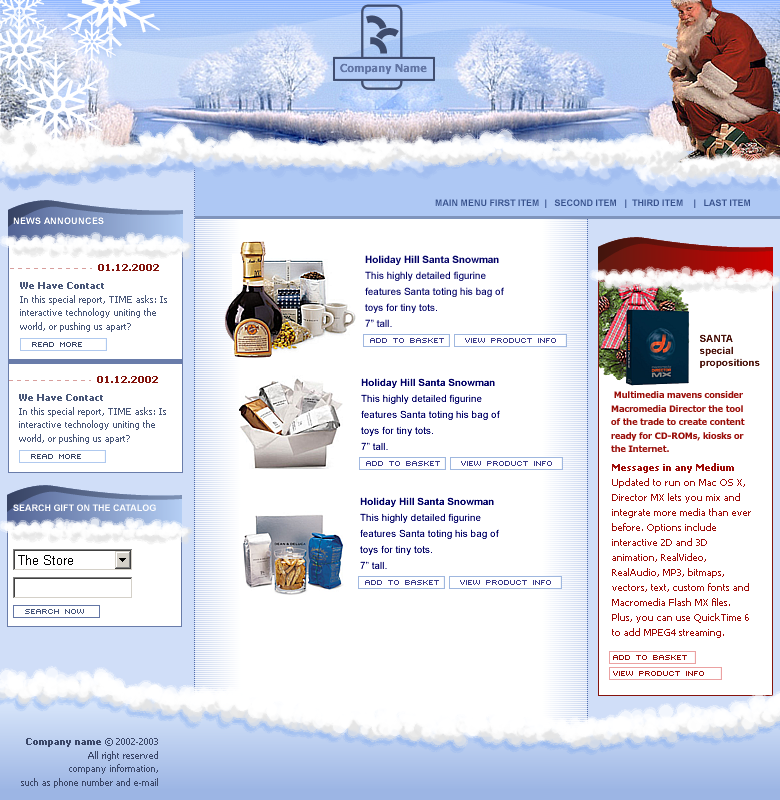
<style>
.page{position:relative;width:780px;height:800px;background:#ffffff}
.page>*{position:absolute;margin:0}
.t1{font:9px "Arial-BoldMT";color:#38528d}
.t2{font:9px "Arial-BoldMT";color:#ffffff}
.t3{font:10px/16px "ArialMT";color:#000066}
.t4{font:10px/16px "Arial-BoldMT";color:#000066}
.t5{font:9px "Tahoma-Bold";color:#83130c}
.t6{font:9px/13.5px "Tahoma";color:#495779}
.t7{font:9px/13.5px "Tahoma-Bold";color:#495779}
.t8{font:8px "Sevenet 7 Cyr";letter-spacing:0.14em;color:#3b4869}
.t9{font:8px "Sevenet 7 Cyr";letter-spacing:0.14em;color:#3d3d8b}
.t10{font:10px/12px "Arial-BoldMT";color:#4b140c}
.t11{font:9px/13.5px "Tahoma-Bold";color:#9a0d08}
.t12{font:10px/15px "Tahoma";color:#9e0c08}
.t13{font:10px/15px "Tahoma-Bold";color:#9e0c08}
.t14{font:8px "Sevenet 7 Cyr";letter-spacing:0.14em;color:#47567c}
.t15{font:8px/8px "Sevenet 7 Cyr";letter-spacing:0.14em;color:#960e09}
.t16{font:9px/13.5px "Tahoma";color:#3b4768}
.t17{font:9px/13.5px "Tahoma-Bold";color:#3b4768}
</style>
<div class="page">
<p class="t1" style="left:435px;top:199px;width:315px;height:9px">MAIN MENU FIRST ITEM  |   SECOND ITEM   |  THIRD ITEM    |   LAST ITEM</p>
<p class="t2" style="left:13px;top:217px;width:91px;height:7px">NEWS ANNOUNCES</p>
<p class="t3" style="left:365px;top:255px;width:139px;height:72px"><span class="t4">Holiday Hill Santa Snowman</span><br>This highly detailed figurine <br>features Santa toting his bag of <br>toys for tiny tots.<br>7” tall.</p>
<p class="t5" style="left:98px;top:264px;width:61px;height:7px">01.12.2002</p>
<p class="t6" style="left:20px;top:282px;width:147px;height:50px"><span class="t7">We Have Contact</span><br>In this special report, TIME asks: Is <br>interactive technology uniting the <br>world, or pushing us apart?</p>
<p class="t8" style="left:32px;top:342px;width:50px;height:5px">READ MORE</p>
<p class="t9" style="left:370px;top:338px;width:186px;height:5px">add to basket    view product info</p>
<p class="t10" style="left:700px;top:334px;width:60px;height:34px">SANTA<br>special<br>propositions</p>
<p class="t5" style="left:97px;top:376px;width:61px;height:7px">01.12.2002</p>
<p class="t3" style="left:361px;top:378px;width:139px;height:72px"><span class="t4">Holiday Hill Santa Snowman</span><br>This highly detailed figurine <br>features Santa toting his bag of <br>toys for tiny tots.<br>7” tall.</p>
<p class="t6" style="left:19px;top:394px;width:147px;height:50px"><span class="t7">We Have Contact</span><br>In this special report, TIME asks: Is <br>interactive technology uniting the <br>world, or pushing us apart?</p>
<p class="t11" style="left:611px;top:391px;width:134px;height:61px">Multimedia mavens consider <br>Macromedia Director the tool <br>of the trade to create content <br>ready for CD-ROMs, kiosks or <br>the Internet.</p>
<p class="t8" style="left:31px;top:454px;width:50px;height:5px">READ MORE</p>
<p class="t9" style="left:366px;top:461px;width:186px;height:5px">add to basket    view product info</p>
<p class="t12" style="left:612px;top:463px;width:139px;height:175px"><span class="t13">Messages in any Medium</span><br>Updated to run on Mac OS X, <br>Director MX lets you mix and <br>integrate more media than ever <br>before. Options include <br>interactive 2D and 3D <br>animation, RealVideo, <br>RealAudio, MP3, bitmaps, <br>vectors, text, custom fonts and <br>Macromedia Flash MX files. <br>Plus, you can use QuickTime 6 <br>to add MPEG4 streaming.</p>
<p class="t3" style="left:360px;top:497px;width:139px;height:72px"><span class="t4">Holiday Hill Santa Snowman</span><br>This highly detailed figurine <br>features Santa toting his bag of <br>toys for tiny tots.<br>7” tall.</p>
<p class="t2" style="left:13px;top:504px;width:143px;height:7px">SEARCH GIFT ON THE CATALOG</p>
<p class="t9" style="left:365px;top:580px;width:186px;height:5px">add to basket    view product info</p>
<p class="t14" style="left:25px;top:609px;width:59px;height:5px">SEARCH NOW</p>
<p class="t15" style="left:613px;top:655px;width:91px;height:21px">add to basket<br><br>view product info</p>
<p class="t16" style="left:21px;top:738px;width:137px;height:50px"><span class="t17">Company name </span>© 2002-2003<br>All right reserved<br>company information,<br> such as phone number and e-mail</p>
</div>
